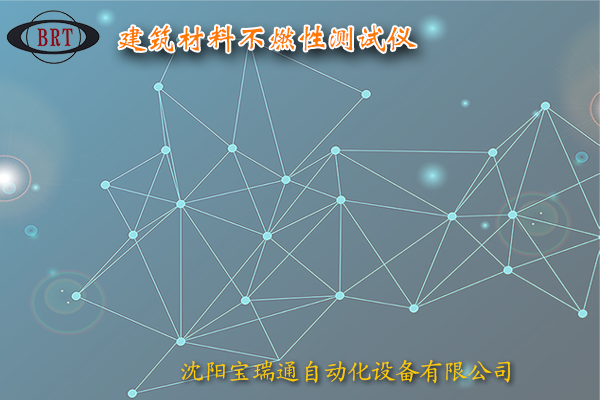
<style>
.page{position:relative;width:600px;height:400px}
.page>*{position:absolute;margin:0}
.t1{font:30px "CTWeiBeiSJ";color:#ff9000}
.t2{font:24px "KaiTi_GB2312";color:#ffcc00}
</style>
<div class="page">
<p class="t1" style="left:119px;top:25px;width:297px;height:28px">建筑材料不燃性测试仪</p>
<p class="t2" style="left:181px;top:359px;width:330px;height:25px">沈阳宝瑞通自动化设备有限公司</p>
</div>
